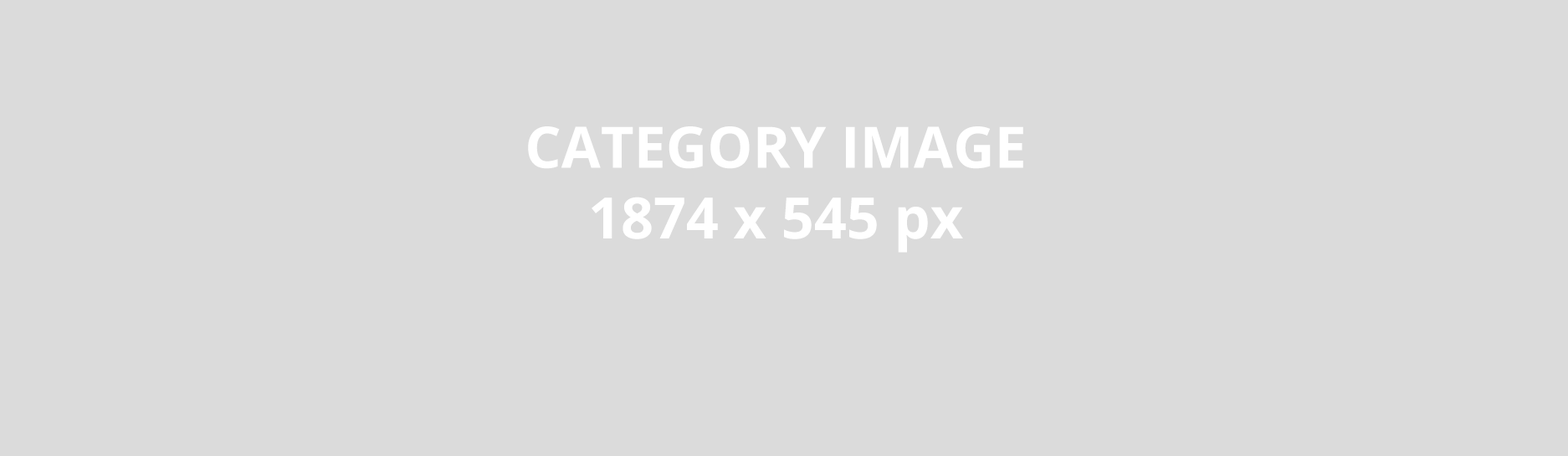
<style>
.page{position:relative;width:1568px;height:456px;background:#dbdbdb}
.page>*{position:absolute;margin:0}
.t1{font:57.2px/35.3px "OpenSans-Bold";color:#ffffff}
</style>
<div class="page">
<p class="t1" style="left:528px;top:126px;width:495px;height:127px;text-align:center">CATEGORY IMAGE<br><br>1874 x 545 px</p>
</div>
